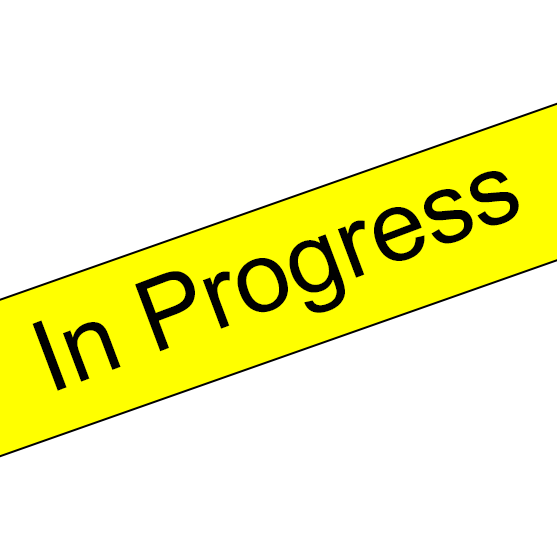
<style>
.page{position:relative;width:557px;height:557px;background:#ffffff}
.page>*{position:absolute;margin:0}
.t1{font:100px "ArialMT";color:#000000}
</style>
<div class="page">
<p class="t1" style="left:32px;top:171px;width:487px;height:220px;rotate:-21deg">In Progress</p>
</div>
